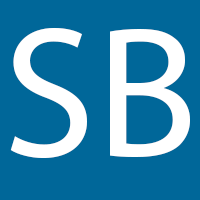
<style>
.page{position:relative;width:200px;height:200px;background:#006799}
.page>*{position:absolute;margin:0}
.t1{font:187px "MyriadPro-Regular";color:#ffffff}
</style>
<div class="page">
<p class="t1" style="left:10px;top:27px;width:180px;height:131px">SB</p>
</div>
